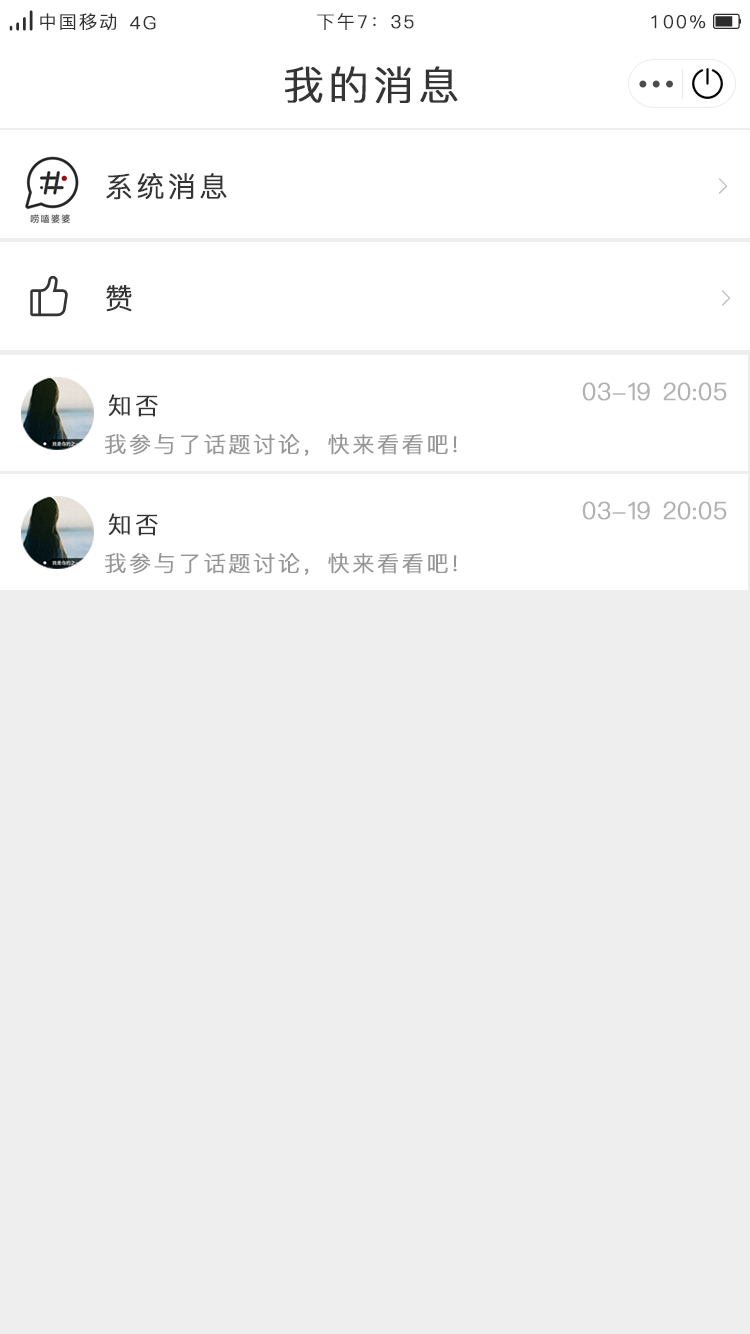
<style>
.page{position:relative;width:750px;height:1334px;background:#eeeeee}
.page>*{position:absolute;margin:0}
.t1{font:18px "PingFang-SC-Regular";letter-spacing:0.1em;color:#323232;font-weight:bold}
.t2{font:40px "PingFang-SC-Regular";letter-spacing:0.1em;color:#353535;font-weight:bold}
.t3{font:28px "PingFang-SC-Regular";letter-spacing:0.1em;color:#353535;font-weight:bold}
.t4{font:24px "PingFang-SC-Regular";letter-spacing:0.1em;color:#b2b2b2;font-weight:bold}
.t5{font:24px "PingFang-SC-Regular";letter-spacing:0.1em;color:#353535;font-weight:bold}
.t6{font:22px "PingFang-SC-Regular";letter-spacing:0.1em;color:#969696;font-weight:bold}
</style>
<div class="page">
<p class="t1" style="left:40px;top:13px;width:76px;height:18px">中国移动</p>
<p class="t1" style="left:130px;top:16px;width:26px;height:14px">4G</p>
<p class="t1" style="left:317px;top:13px;width:97px;height:17px">下午7：35</p>
<p class="t1" style="left:651px;top:15px;width:55px;height:14px">100%</p>
<p class="t2" style="left:285px;top:66px;width:173px;height:38px">我的消息</p>
<p class="t3" style="left:106px;top:173px;width:121px;height:27px">系统消息</p>
<p class="t3" style="left:106px;top:285px;width:26px;height:27px">赞</p>
<p class="t4" style="left:582px;top:382px;width:145px;height:19px">03-19 20:05</p>
<p class="t5" style="left:108px;top:394px;width:50px;height:23px">知否</p>
<p class="t6" style="left:105px;top:434px;width:352px;height:22px">我参与了话题讨论，快来看看吧!</p>
<p class="t4" style="left:582px;top:501px;width:145px;height:19px">03-19 20:05</p>
<p class="t5" style="left:108px;top:513px;width:50px;height:23px">知否</p>
<p class="t6" style="left:105px;top:553px;width:352px;height:22px">我参与了话题讨论，快来看看吧!</p>
</div>
